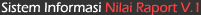
<style>
.page{position:relative;width:201px;height:15px;background:#333333}
.page>*{position:absolute;margin:0}
.t1{font:14px "ErasITC-Medium";color:#ffffff}
.t2{font:14px "ErasITC-Medium";color:#ff3f3f}
</style>
<div class="page">
<p class="t1" style="left:1px;top:2px;width:198px;height:14px">Sistem Informasi <span class="t2">Nilai Raport V.1</span></p>
</div>
